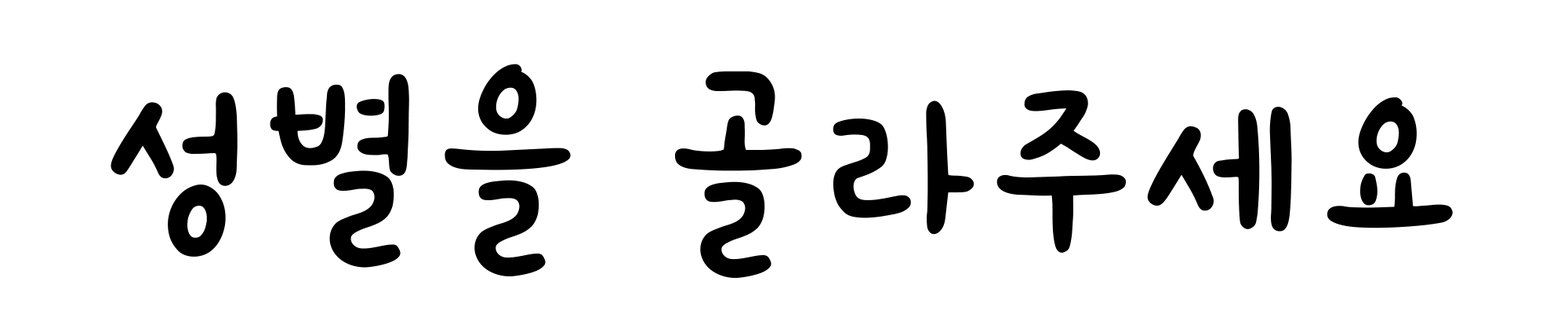
<style>
.page{position:relative;width:1568px;height:336px;background:#ffffff}
.page>*{position:absolute;margin:0}
.t1{font:196px "godoMaum";letter-spacing:0.1em;color:#000000}
</style>
<div class="page">
<p class="t1" style="left:111px;top:64px;width:1342px;height:214px">성별을 골라주세요</p>
</div>
